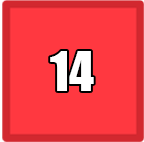
<style>
.page{position:relative;width:144px;height:142px;background:#ff3840}
.page>*{position:absolute;margin:0}
.t1{font:50px "Impact";color:#ffffff}
</style>
<div class="page">
<p class="t1" style="left:50px;top:51px;width:44px;height:40px">14</p>
</div>
